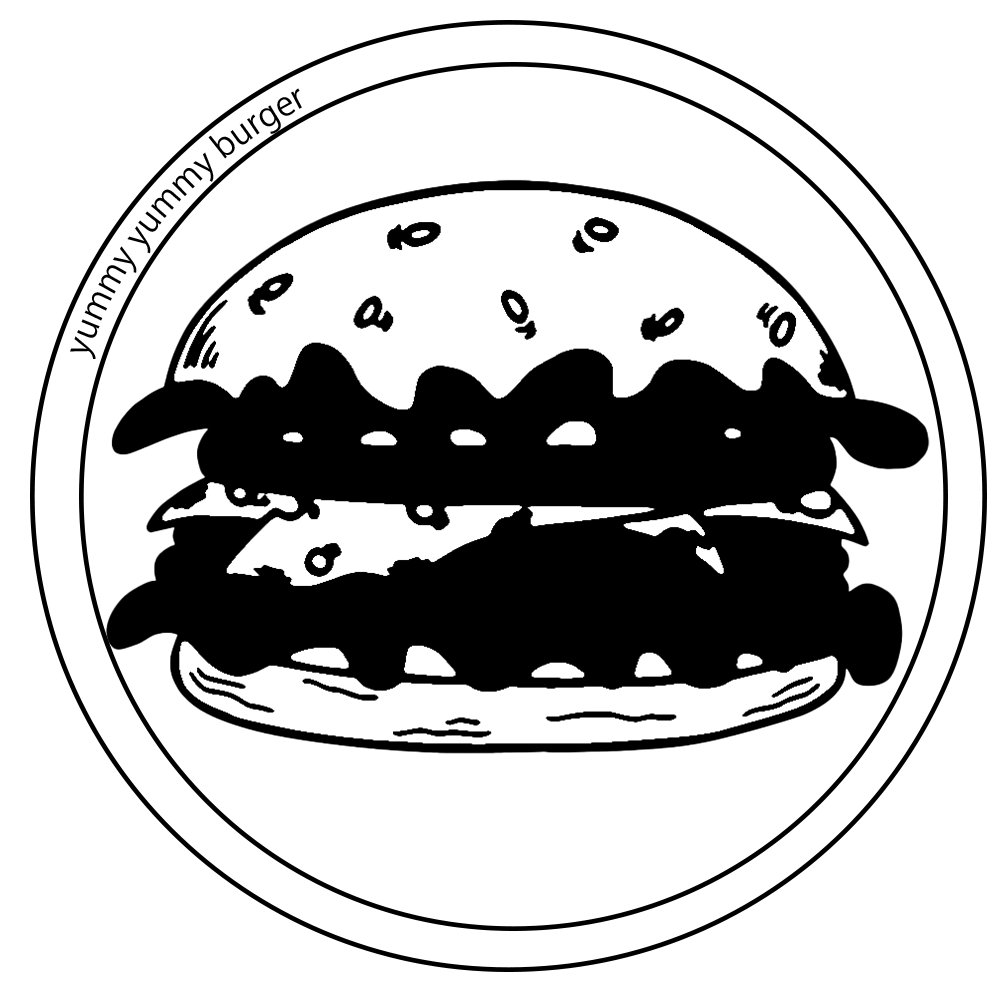
<style>
.page{position:relative;width:1000px;height:1000px;background:#ffffff}
.page>*{position:absolute;margin:0}
.t1{font:33.3px "KozGoPr6N-Regular";color:#000000}
</style>
<div class="page">
<p class="t1" style="left:70px;top:88px;width:232px;height:271px">yummy yummy burger</p>
</div>
